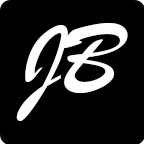
<style>
.page{position:relative;width:144px;height:144px;background:#000000}
.page>*{position:absolute;margin:0}
.t1{font:104.2px "BrushScriptMT";color:#ffffff}
</style>
<div class="page">
<p class="t1" style="left:16px;top:23px;width:112px;height:98px">JB</p>
</div>
